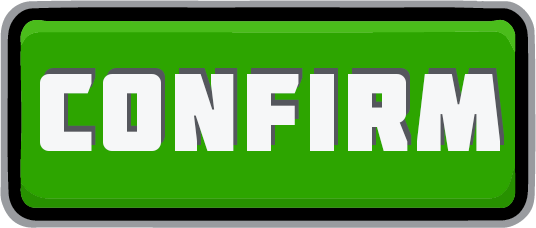
<style>
.page{position:relative;width:536px;height:228px;background:#2da500}
.page>*{position:absolute;margin:0}
.t1{font:110px "Molot";letter-spacing:0.05em;color:#f6f7f8}
</style>
<div class="page">
<p class="t1" style="left:40px;top:74px;width:460px;height:77px">confirm</p>
<p class="t1" style="left:44px;top:68px;width:460px;height:77px">confirm</p>
</div>
